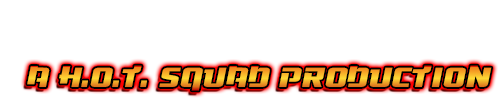
<style>
.page{position:relative;width:500px;height:100px;background:#ffffff}
.page>*{position:absolute;margin:0}
.t1{font:36px "Osaka-SansSerif"}
</style>
<div class="page">
<p class="t1" style="left:27px;top:65px;width:465px;height:26px">A H.o.t. Squad Production</p>
</div>
